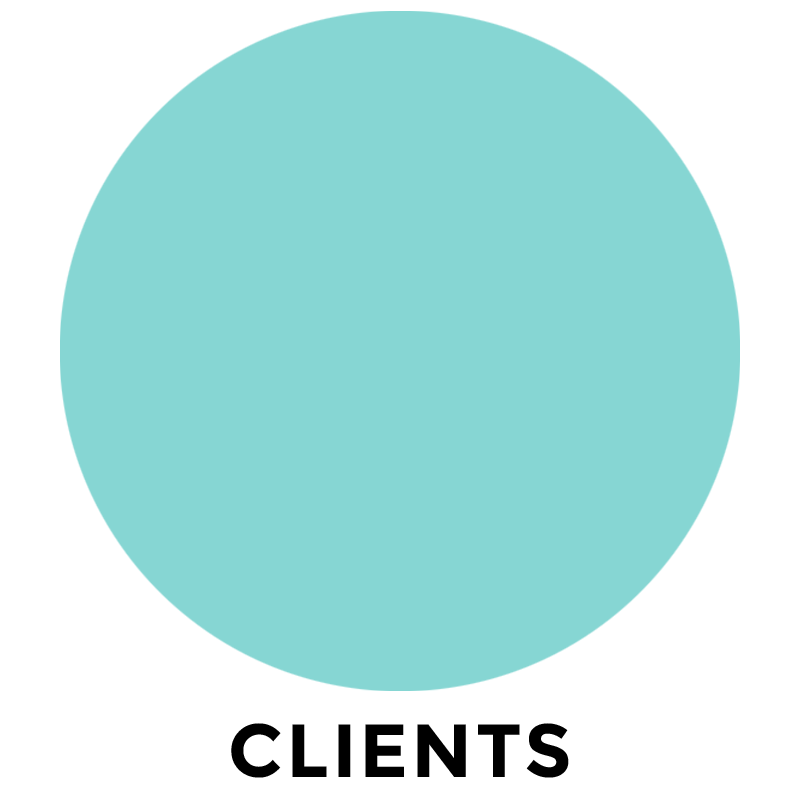
<style>
.page{position:relative;width:800px;height:800px;background:#86d6d3}
.page>*{position:absolute;margin:0}
.t1{font:75px "Montserrat-Bold";letter-spacing:0.04em;color:#000000}
</style>
<div class="page">
<p class="t1" style="left:231px;top:723px;width:338px;height:55px">CLIENTS</p>
</div>
